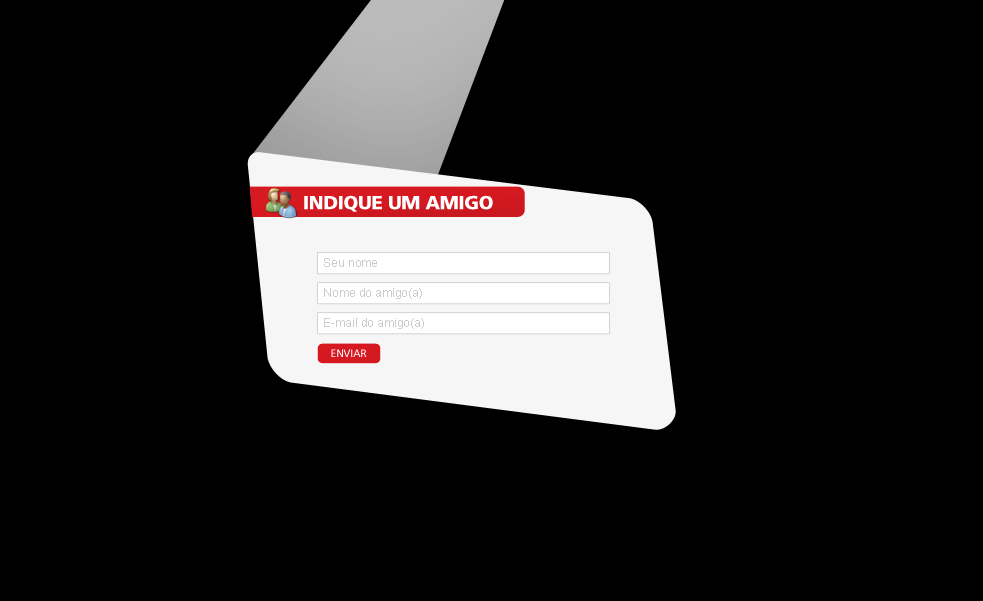
<style>
.page{position:relative;width:983px;height:601px;background:#000000}
.page>*{position:absolute;margin:0}
.t1{font:19px "FrutigerLTStd-Black";letter-spacing:-0.02em;color:#ffffff;text-transform:uppercase}
.t2{font:12px "ArialMT";color:#cccccc}
.t3{font:10.5px "FrutigerLTStd-Roman";letter-spacing:-0.02em;color:#ffffff;text-transform:uppercase}
</style>
<div class="page">
<p class="t1" style="left:304px;top:195px;width:189px;height:17px">indique um amigo</p>
<p class="t2" style="left:324px;top:258px;width:53px;height:9px">Seu nome</p>
<p class="t2" style="left:324px;top:288px;width:98px;height:11px">Nome do amigo(a)</p>
<p class="t2" style="left:324px;top:318px;width:100px;height:11px">E-mail do amigo(a)</p>
<p class="t3" style="left:331px;top:349px;width:36px;height:8px">Enviar</p>
</div>
